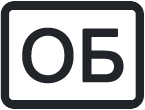
<style>
.page{position:relative;width:145px;height:110px;background:#ffffff}
.page>*{position:absolute;margin:0}
.t1{font:72px "ArialMT";color:#212429;font-weight:bold}
</style>
<div class="page">
<p class="t1" style="left:22px;top:27px;width:102px;height:57px">ОБ</p>
</div>
